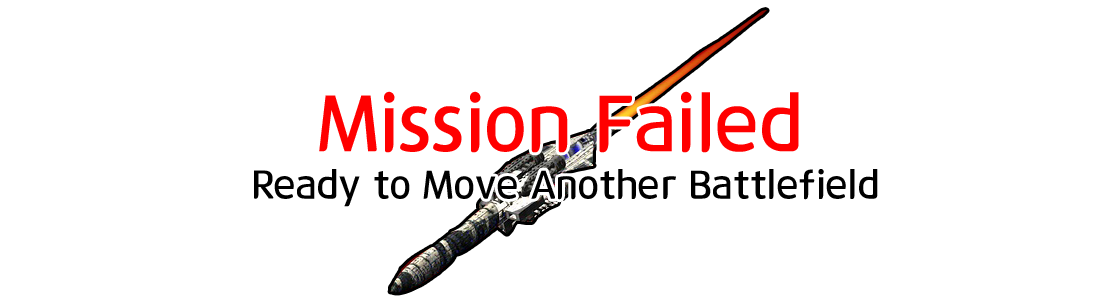
<style>
.page{position:relative;width:1100px;height:300px;background:#ffffff}
.page>*{position:absolute;margin:0}
.t1{font:80px "12LotteMartDreamBold";color:#ff0000}
.t2{font:40px "12LotteMartDreamBold";color:#000000}
</style>
<div class="page">
<p class="t1" style="left:319px;top:91px;width:480px;height:62px">Mission Failed</p>
<p class="t2" style="left:254px;top:169px;width:624px;height:38px">Ready to Move Another Battlefield</p>
</div>
